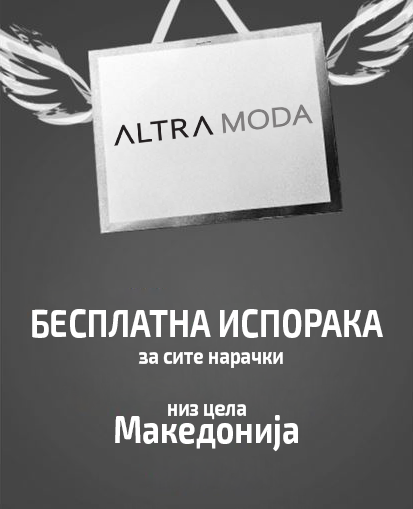
<style>
.page{position:relative;width:413px;height:509px}
.page>*{position:absolute;margin:0}
.t1{font:23px/26.3px "Exo2-Bold";color:#ffffff;scale:0.81 1}
.t2{font:39.5px/26.3px "Exo2-Bold";color:#ffffff;scale:0.81 1}
</style>
<div class="page">
<p class="t1" style="left:32px;top:309px;width:351px;height:143px"><span class="t2">БЕСПЛАТНА ИСПОРАКА<br></span>                           за сите нарачки<br><br>                                  низ цела<br><span class="t2">            Македонија</span></p>
</div>
